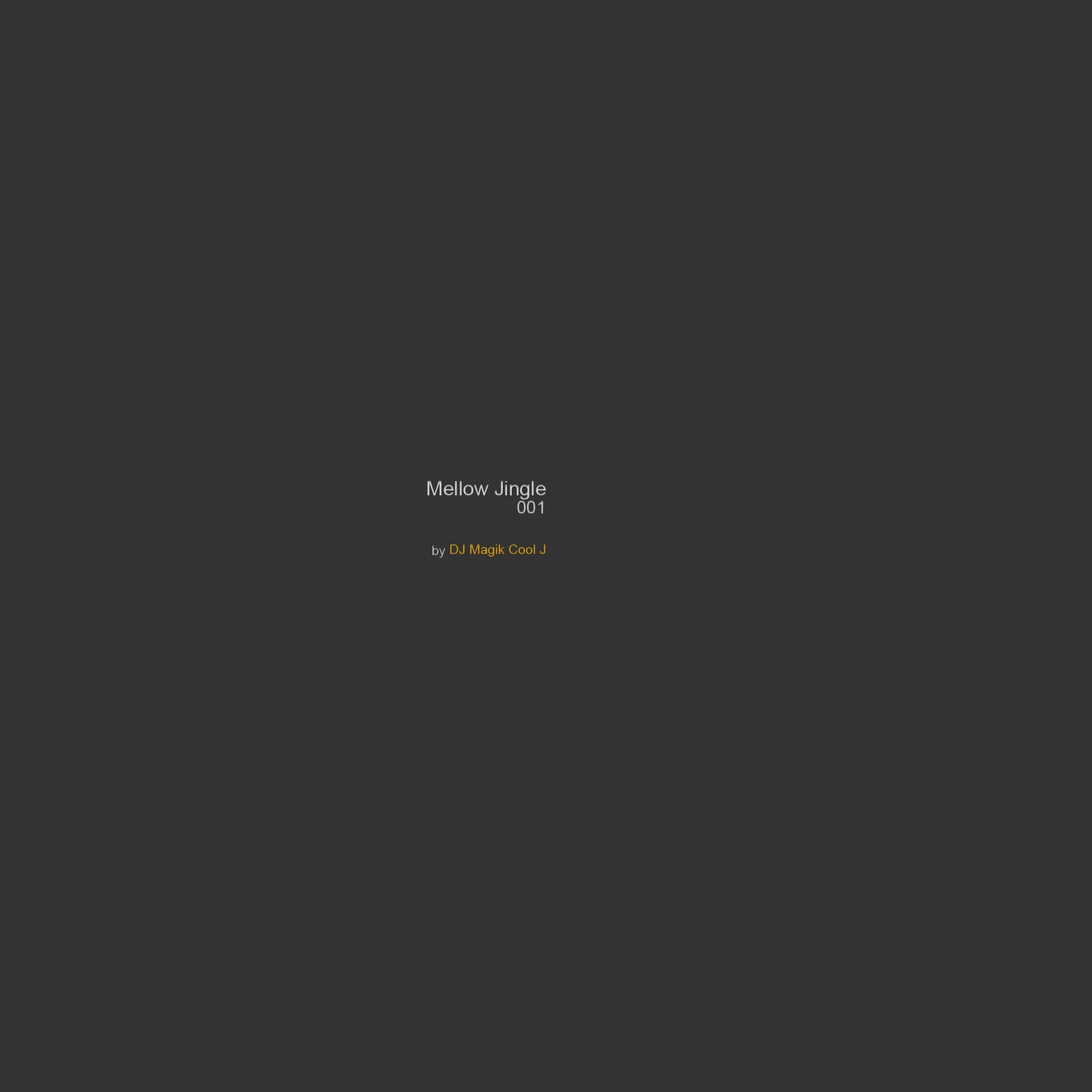
<style>
.page{position:relative;width:1092px;height:1092px;background:#333333}
.page>*{position:absolute;margin:0}
.t1{font:20px/20px "ArialMT";color:#c3c3c3}
.t2{font:13.3px/20px "ArialMT";color:#c3c3c3}
.t3{font:17.8px "ArialMT";color:#bcbcbc}
.t4{font:13.3px "ArialMT";color:#c7910d}
.t5{font:17.8px "ArialMT";color:#c7910d}
</style>
<div class="page">
<p class="t1" style="left:427px;top:481px;width:119px;height:77px;text-align:justify">Mellow Jingle<br><br><br><span class="t2">   by</span></p>
<p class="t3" style="left:517px;top:501px;width:26px;height:12px">001</p>
<p class="t4" style="left:450px;top:544px;width:95px;height:13px"><span class="t5"><br></span>DJ Magik Cool J</p>
</div>
